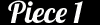
<style>
.page{position:relative;width:100px;height:25px;background:#000000}
.page>*{position:absolute;margin:0}
.t1{font:30px "Lobster1.4";color:#fdfdfc}
</style>
<div class="page">
<p class="t1" style="left:8px;top:0px;width:75px;height:23px">Piece 1</p>
</div>
